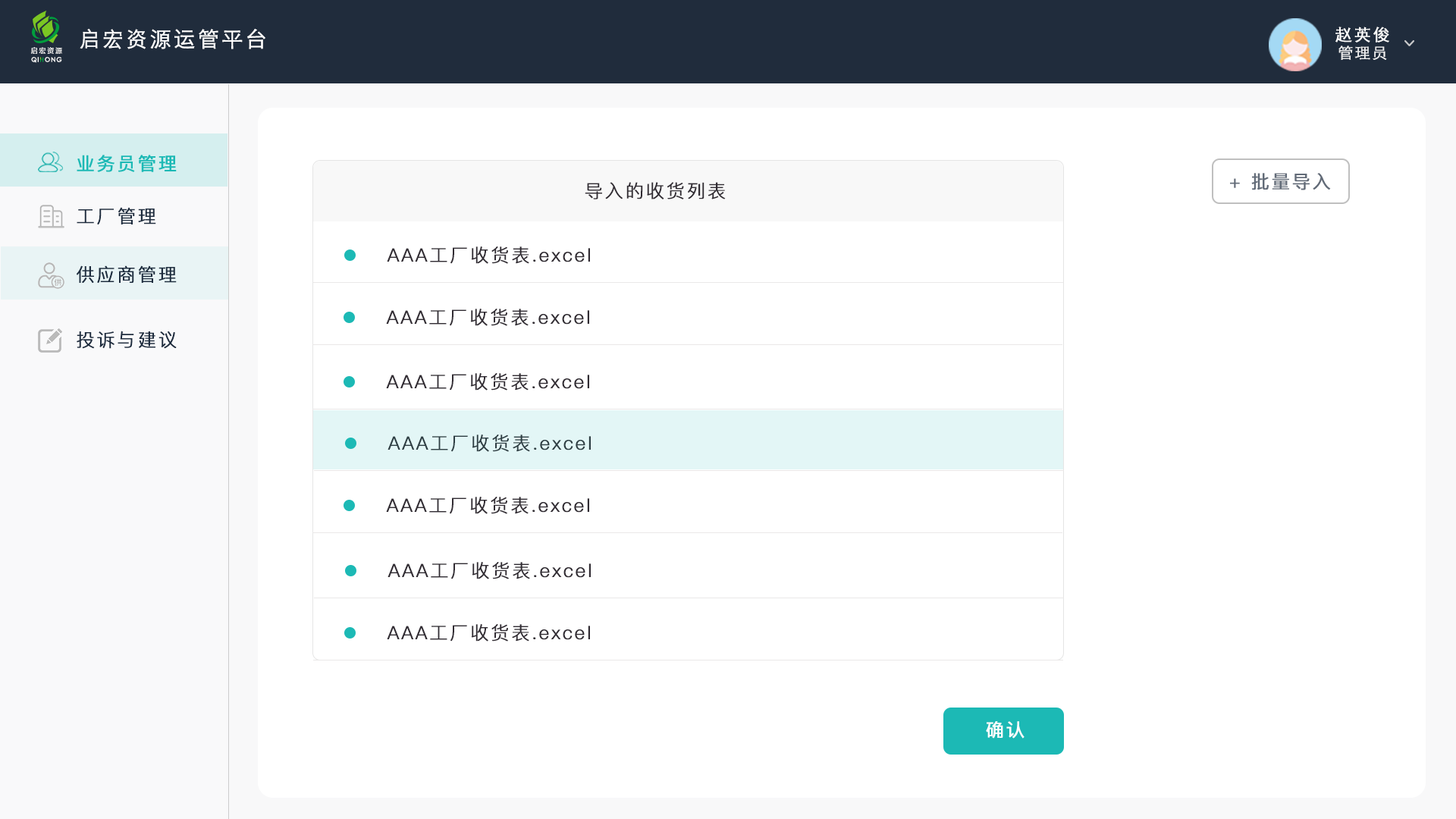
<style>
.page{position:relative;width:1456px;height:819px;background:#ffffff}
.page>*{position:absolute;margin:0}
.t1{font:21.2px "STHeitiSC-Light";letter-spacing:0.1em;color:#ffffff;font-weight:bold}
.t2{font:16.7px "STHeitiSC-Light";letter-spacing:0.1em;color:#ffffff;font-weight:bold}
.t3{font:7px "FZLTZHK--GBK1-0";letter-spacing:0.18em;color:#ffffff}
.t4{font:15.2px "STHeitiSC-Light";letter-spacing:0.1em;color:#ffffff;font-weight:bold}
.t5{font:6.3px "CenturyGothic";letter-spacing:0.1em;color:#ffffff;font-weight:bold}
.t6{font:18.2px "PingFangSC-Regular";letter-spacing:0.1em;color:#1cb9b5;font-weight:bold}
.t7{font:18.2px "PingFangSC-Regular";letter-spacing:0.1em;color:#626b78;font-weight:bold}
.t8{font:18.2px "PingFangSC-Light";letter-spacing:0.1em;color:#312c33;font-weight:bold}
.t9{font:18.2px "PingFangSC-Light";letter-spacing:0.1em;color:#1e2c3e;font-weight:bold}
.t10{font:18.2px "PingFangSC-Regular";letter-spacing:0.1em;color:#ffffff;font-weight:bold}
</style>
<div class="page">
<p class="t1" style="left:80px;top:29px;width:185px;height:20px">启宏资源运管平台</p>
<p class="t2" style="left:1335px;top:27px;width:54px;height:15px">赵英俊</p>
<p class="t3" style="left:31px;top:47px;width:31px;height:7px">启宏资源</p>
<p class="t4" style="left:1338px;top:45px;width:49px;height:15px;opacity:0.9">管理员</p>
<p class="t5" style="left:31px;top:57px;width:31px;height:6px">QI  ONG</p>
<p class="t6" style="left:77px;top:155px;width:100px;height:17px">业务员管理</p>
<p class="t7" style="left:1230px;top:173px;width:101px;height:17px">+ 批量导入</p>
<p class="t8" style="left:585px;top:182px;width:141px;height:17px">导入的收货列表</p>
<p class="t9" style="left:77px;top:207px;width:79px;height:17px">工厂管理</p>
<p class="t8" style="left:387px;top:246px;width:203px;height:18px">AAA工厂收货表.excel</p>
<p class="t9" style="left:77px;top:265px;width:100px;height:18px">供应商管理</p>
<p class="t8" style="left:386px;top:309px;width:203px;height:17px">AAA工厂收货表.excel</p>
<p class="t9" style="left:77px;top:331px;width:100px;height:18px">投诉与建议</p>
<p class="t8" style="left:386px;top:373px;width:203px;height:18px">AAA工厂收货表.excel</p>
<p class="t8" style="left:388px;top:435px;width:203px;height:17px">AAA工厂收货表.excel</p>
<p class="t8" style="left:386px;top:497px;width:203px;height:17px">AAA工厂收货表.excel</p>
<p class="t8" style="left:388px;top:562px;width:203px;height:17px">AAA工厂收货表.excel</p>
<p class="t8" style="left:387px;top:624px;width:203px;height:18px">AAA工厂收货表.excel</p>
<p class="t10" style="left:986px;top:721px;width:38px;height:18px">确认</p>
</div>
